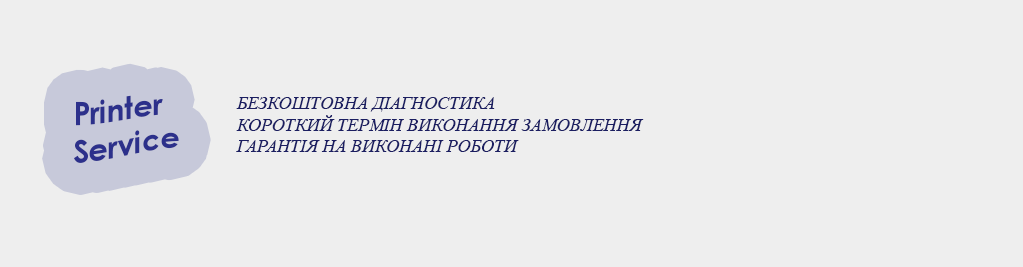
<style>
.page{position:relative;width:1023px;height:267px;background:#eeeeee}
.page>*{position:absolute;margin:0}
.t1{font:30px "CenturyGothic-Bold";color:#2c308b}
.t2{font:18px "TimesNewRomanPS-ItalicMT";color:#1b1e61}
</style>
<div class="page">
<p class="t1" style="left:74px;top:95px;width:105px;height:68px">Printer <br>Service</p>
<p class="t2" style="left:236px;top:97px;width:408px;height:55px">БЕЗКОШТОВНА ДІАГНОСТИКА<br>КОРОТКИЙ ТЕРМІН ВИКОНАННЯ ЗАМОВЛЕННЯ<br>ГАРАНТІЯ НА ВИКОНАНІ РОБОТИ</p>
</div>
